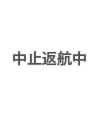
<style>
.page{position:relative;width:100px;height:116px;background:#ffffff}
.page>*{position:absolute;margin:0}
.t1{font:15px "GothicMB101Pr6N-Medium";color:#535353}
</style>
<div class="page">
<p class="t1" style="left:13px;top:51px;width:73px;height:15px">中止返航中</p>
</div>
